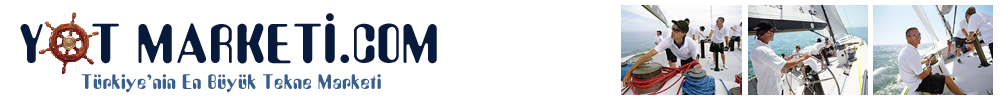
<style>
.page{position:relative;width:1000px;height:100px;background:#ffffff}
.page>*{position:absolute;margin:0}
.t1{font:48px "TrSahAmy";color:#071a3c}
.t2{font:18px "TrSahAmy";color:#395f8b}
</style>
<div class="page">
<p class="t1" style="left:20px;top:13px;width:417px;height:51px">Y   T MARKETÝ.COM</p>
<p class="t2" style="left:81px;top:74px;width:300px;height:19px">Türkiye’nin En Büyük Tekne Marketi</p>
</div>
